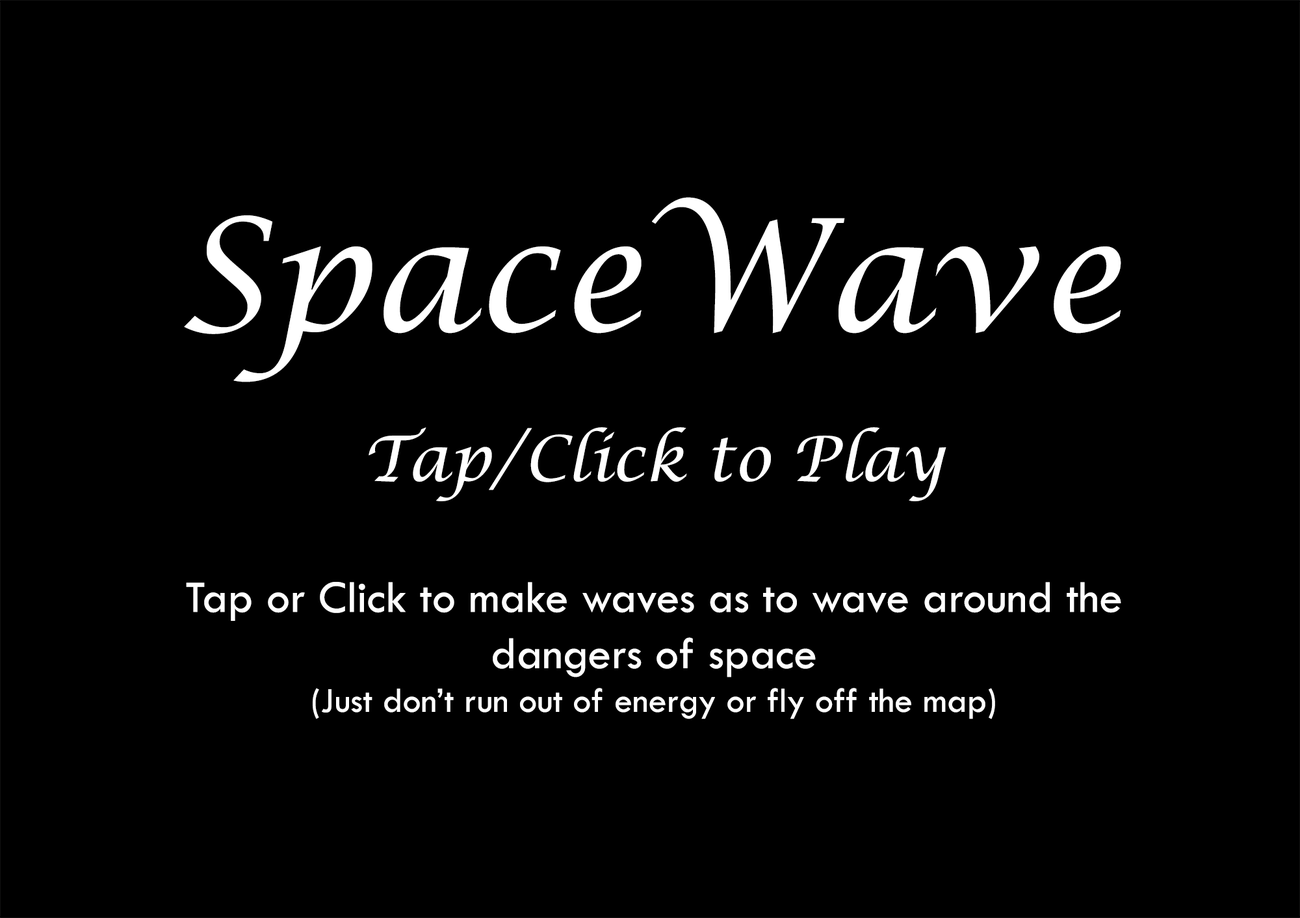
<style>
.page{position:relative;width:1300px;height:918px;background:#000000}
.page>*{position:absolute;margin:0}
.t1{font:46.8px "TwCenMT-Regular";color:#ffffff}
.t2{font:156px "LucidaCalligraphy-Italic";color:#ffffff}
.t3{font:62.4px "LucidaCalligraphy-Italic";color:#ffffff}
.t4{font:36.4px "TwCenMT-Regular";color:#ffffff}
</style>
<div class="page">
<p class="t1" style="left:184px;top:197px;width:937px;height:522px"><span class="t2">SpaceWave<br></span><span class="t3"><br>Tap/Click to Play<br><br></span>Tap or Click to make waves as to wave around the dangers of space<br><span class="t4">(Just don’t run out of energy or fly off the map)</span></p>
</div>
